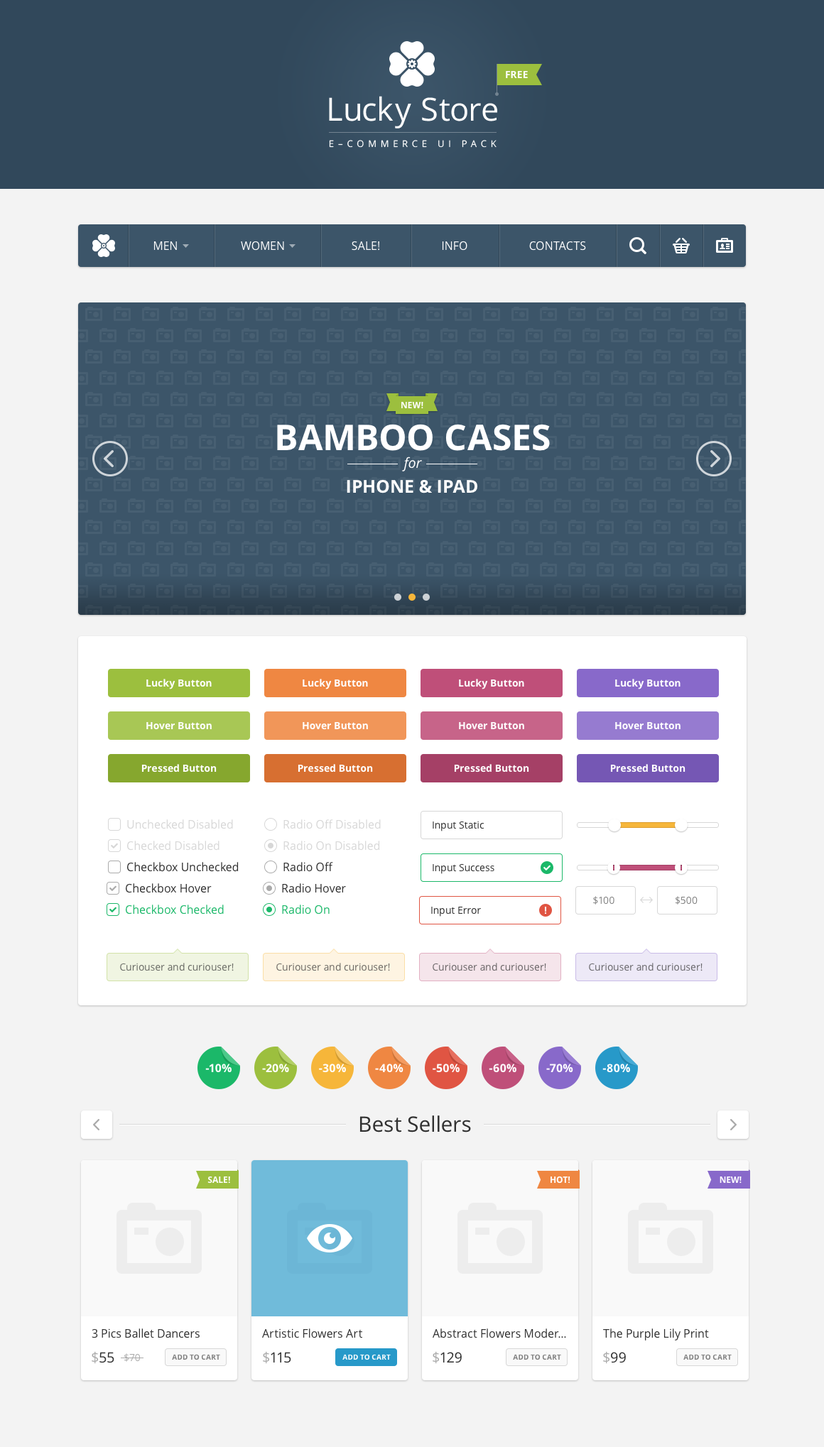
<style>
.page{position:relative;width:824px;height:1447px;background:#f3f3f3}
.page>*{position:absolute;margin:0}
.t1{font:9.9px "OpenSans-Bold";color:#ffffff;text-transform:uppercase}
.t2{font:32px "OpenSans";letter-spacing:0.01em;color:#ffffff}
.t3{font:9.2px "OpenSans";letter-spacing:0.445em;color:#ffffff;text-transform:uppercase}
.t4{font:11.4px "OpenSans";color:#ffffff;text-transform:uppercase}
.t5{font:8.5px "OpenSans-Bold";color:#ffffff;text-transform:uppercase}
.t6{font:35.5px "OpenSans-Bold";color:#ffffff;text-transform:uppercase}
.t7{font:14.2px "OpenSans-Italic";color:#ffffff}
.t8{font:17.8px "OpenSans-Bold";color:#ffffff;text-transform:uppercase}
.t9{font:9.9px "OpenSans-Bold";color:#ffffff}
.t10{font:11.4px "OpenSans";color:#d7d7d7}
.t11{font:9.9px "OpenSans";color:#303030}
.t12{font:11.4px "OpenSans";color:#303030}
.t13{font:11.4px "OpenSans";color:#1bb869}
.t14{font:9.9px "OpenSans";color:#808080}
.t15{font:9.9px "OpenSans";color:#696b65}
.t16{font:9.9px "OpenSans";color:#6d6a65}
.t17{font:9.9px "OpenSans";color:#6b6668}
.t18{font:9.9px "OpenSans";color:#68676b}
.t19{font:11.4px "OpenSans-Bold";color:#ffffff;text-transform:uppercase}
.t20{font:21.3px "OpenSans";color:#303030}
.t21{font:14.2px "OpenSans";color:#303030}
.t22{font:14.2px "OpenSans";color:#aaaaaa}
.t23{font:9.9px "OpenSans";color:#aaaaaa}
.t24{font:7.1px "OpenSans-Bold";color:#808080;text-transform:uppercase}
.t25{font:7.1px "OpenSans-Bold";color:#ffffff;text-transform:uppercase}
</style>
<div class="page">
<p class="t1" style="left:506px;top:71px;width:22px;height:7px">Free</p>
<p class="t2" style="left:329px;top:96px;width:168px;height:33px">Lucky Store</p>
<p class="t3" style="left:329px;top:140px;width:167px;height:8px">E–commerce ui Pack</p>
<p class="t4" style="left:153px;top:241px;width:24px;height:9px">Men</p>
<p class="t4" style="left:241px;top:241px;width:43px;height:10px">Women</p>
<p class="t4" style="left:352px;top:241px;width:27px;height:10px">Sale!</p>
<p class="t4" style="left:442px;top:241px;width:25px;height:10px">Info</p>
<p class="t4" style="left:529px;top:241px;width:57px;height:10px">Contacts</p>
<p class="t5" style="left:401px;top:402px;width:22px;height:7px">New!</p>
<p class="t6" style="left:277px;top:424px;width:273px;height:27px">Bamboo Cases</p>
<p class="t7" style="left:402px;top:457px;width:20px;height:15px">for</p>
<p class="t8" style="left:347px;top:479px;width:130px;height:15px">iPhone &amp; iPad</p>
<p class="t9" style="left:146px;top:679px;width:66px;height:11px">Lucky Button</p>
<p class="t9" style="left:303px;top:679px;width:65px;height:11px">Lucky Button</p>
<p class="t9" style="left:459px;top:679px;width:65px;height:11px">Lucky Button</p>
<p class="t9" style="left:615px;top:679px;width:65px;height:11px">Lucky Button</p>
<p class="t9" style="left:146px;top:722px;width:66px;height:8px">Hover Button</p>
<p class="t9" style="left:303px;top:722px;width:65px;height:8px">Hover Button</p>
<p class="t9" style="left:459px;top:722px;width:65px;height:8px">Hover Button</p>
<p class="t9" style="left:615px;top:722px;width:65px;height:8px">Hover Button</p>
<p class="t9" style="left:141px;top:764px;width:76px;height:9px">Pressed Button</p>
<p class="t9" style="left:298px;top:764px;width:75px;height:9px">Pressed Button</p>
<p class="t9" style="left:454px;top:764px;width:75px;height:9px">Pressed Button</p>
<p class="t9" style="left:610px;top:764px;width:75px;height:9px">Pressed Button</p>
<p class="t10" style="left:127px;top:820px;width:106px;height:10px">Unchecked Disabled</p>
<p class="t10" style="left:283px;top:820px;width:98px;height:10px">Radio Off Disabled</p>
<p class="t11" style="left:433px;top:821px;width:51px;height:11px">Input Static</p>
<p class="t10" style="left:127px;top:841px;width:92px;height:10px">Checked Disabled</p>
<p class="t10" style="left:283px;top:841px;width:97px;height:10px">Radio On Disabled</p>
<p class="t12" style="left:127px;top:862px;width:112px;height:10px">Checkbox Unchecked</p>
<p class="t12" style="left:283px;top:862px;width:50px;height:10px">Radio Off</p>
<p class="t11" style="left:433px;top:864px;width:61px;height:10px">Input Success</p>
<p class="t12" style="left:126px;top:883px;width:86px;height:10px">Checkbox Hover</p>
<p class="t12" style="left:282px;top:883px;width:64px;height:10px">Radio Hover</p>
<p class="t13" style="left:126px;top:905px;width:98px;height:10px">Checkbox Checked</p>
<p class="t13" style="left:282px;top:905px;width:48px;height:10px">Radio On</p>
<p class="t14" style="left:593px;top:896px;width:21px;height:9px">$100</p>
<p class="t14" style="left:675px;top:896px;width:22px;height:9px">$500</p>
<p class="t11" style="left:431px;top:907px;width:50px;height:10px">Input Error</p>
<p class="t15" style="left:120px;top:963px;width:114px;height:9px">Curiouser and curiouser!</p>
<p class="t16" style="left:276px;top:963px;width:114px;height:9px">Curiouser and curiouser!</p>
<p class="t17" style="left:433px;top:963px;width:113px;height:9px">Curiouser and curiouser!</p>
<p class="t18" style="left:589px;top:963px;width:113px;height:9px">Curiouser and curiouser!</p>
<p class="t19" style="left:205px;top:1064px;width:27px;height:9px">-10%</p>
<p class="t19" style="left:262px;top:1064px;width:27px;height:9px">-20%</p>
<p class="t19" style="left:319px;top:1064px;width:27px;height:9px">-30%</p>
<p class="t19" style="left:375px;top:1064px;width:28px;height:9px">-40%</p>
<p class="t19" style="left:433px;top:1064px;width:27px;height:9px">-50%</p>
<p class="t19" style="left:489px;top:1064px;width:27px;height:9px">-60%</p>
<p class="t19" style="left:546px;top:1064px;width:27px;height:9px">-70%</p>
<p class="t19" style="left:602px;top:1064px;width:28px;height:9px">-80%</p>
<p class="t20" style="left:359px;top:1116px;width:112px;height:17px">Best Sellers</p>
<p class="t5" style="left:207px;top:1176px;width:23px;height:8px">Sale!</p>
<p class="t5" style="left:550px;top:1176px;width:20px;height:8px">Hot!</p>
<p class="t5" style="left:719px;top:1177px;width:22px;height:7px">New!</p>
<p class="t12" style="left:92px;top:1329px;width:108px;height:10px">3 Pics Ballet Dancers</p>
<p class="t12" style="left:262px;top:1329px;width:100px;height:10px">Artistic Flowers Art</p>
<p class="t12" style="left:433px;top:1329px;width:133px;height:10px">Abstract Flowers Moder...</p>
<p class="t12" style="left:603px;top:1329px;width:106px;height:12px">The Purple Lily Print</p>
<p class="t21" style="left:92px;top:1352px;width:22px;height:12px"><span class="t22">$</span>55</p>
<p class="t23" style="left:124px;top:1354px;width:16px;height:8px">$70</p>
<p class="t24" style="left:172px;top:1354px;width:48px;height:7px">Add to Cart</p>
<p class="t21" style="left:263px;top:1352px;width:28px;height:12px"><span class="t22">$</span>115</p>
<p class="t25" style="left:342px;top:1354px;width:49px;height:7px">Add to Cart</p>
<p class="t21" style="left:433px;top:1352px;width:29px;height:12px"><span class="t22">$</span>129</p>
<p class="t24" style="left:513px;top:1354px;width:48px;height:7px">Add to Cart</p>
<p class="t21" style="left:603px;top:1352px;width:23px;height:12px"><span class="t22">$</span>99</p>
<p class="t24" style="left:683px;top:1354px;width:49px;height:7px">Add to Cart</p>
</div>
